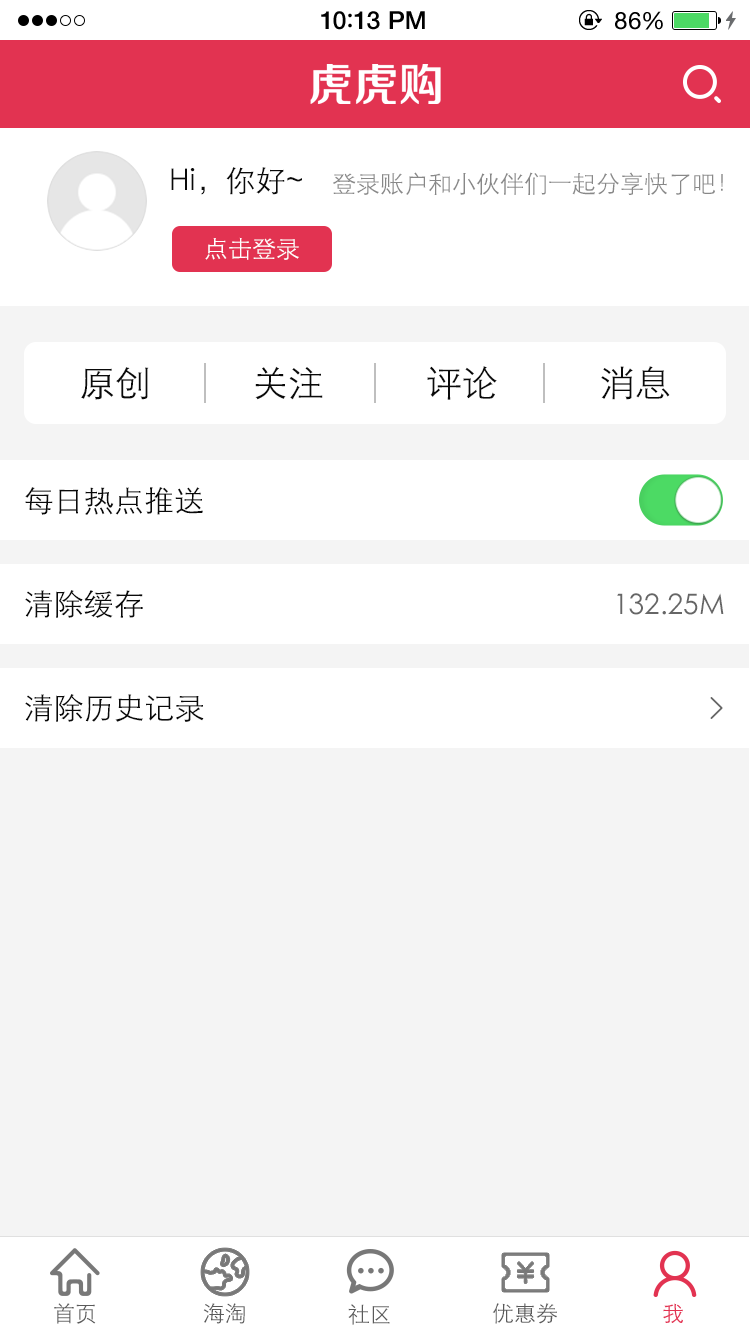
<style>
.page{position:relative;width:750px;height:1334px;background:#ffffff}
.page>*{position:absolute;margin:0}
.t1{font:25px "HelveticaNeue-Medium";letter-spacing:0.015em;color:#000000}
.t2{font:25px "ArialRoundedMTBold";letter-spacing:0.015em;color:#000000}
.t3{font:24px "HelveticaNeue";letter-spacing:0.03em;color:#000000}
.t4{font:30px "STXihei";color:#0a0a0a}
.t5{font:24px "STXihei";color:#888888}
.t6{font:24px "STXihei";color:#ffffff}
.t7{font:36px "STXihei";color:#0a0a0a}
.t8{font:28.2px "STXihei";color:#666666}
.t9{font:21.9px "STXihei";color:#5a5a5a}
.t10{font:21.9px "STXihei";color:#e23351}
</style>
<div class="page">
<p class="t1" style="left:321px;top:11px;width:104px;height:19px">10<span class="t2">:</span>13 PM</p>
<p class="t3" style="left:615px;top:11px;width:48px;height:19px">86%</p>
<p class="t4" style="left:171px;top:167px;width:131px;height:28px">Hi，你好~</p>
<p class="t5" style="left:333px;top:172px;width:390px;height:23px">登录账户和小伙伴们一起分享快了吧！</p>
<p class="t6" style="left:205px;top:237px;width:94px;height:23px">点击登录</p>
<p class="t7" style="left:255px;top:366px;width:68px;height:34px">关注</p>
<p class="t7" style="left:427px;top:366px;width:70px;height:34px">评论</p>
<p class="t7" style="left:601px;top:366px;width:69px;height:34px">消息</p>
<p class="t7" style="left:81px;top:367px;width:68px;height:33px">原创</p>
<p class="t4" style="left:25px;top:487px;width:178px;height:28px">每日热点推送</p>
<p class="t4" style="left:25px;top:590px;width:118px;height:28px">清除缓存</p>
<p class="t8" style="left:617px;top:593px;width:107px;height:22px">132.25M</p>
<p class="t4" style="left:25px;top:694px;width:179px;height:28px">清除历史记录</p>
<p class="t9" style="left:54px;top:1303px;width:42px;height:21px">首页</p>
<p class="t9" style="left:203px;top:1303px;width:42px;height:21px">海淘</p>
<p class="t9" style="left:348px;top:1304px;width:42px;height:21px">社区</p>
<p class="t9" style="left:492px;top:1303px;width:65px;height:21px">优惠券</p>
<p class="t10" style="left:663px;top:1303px;width:20px;height:20px">我</p>
</div>
